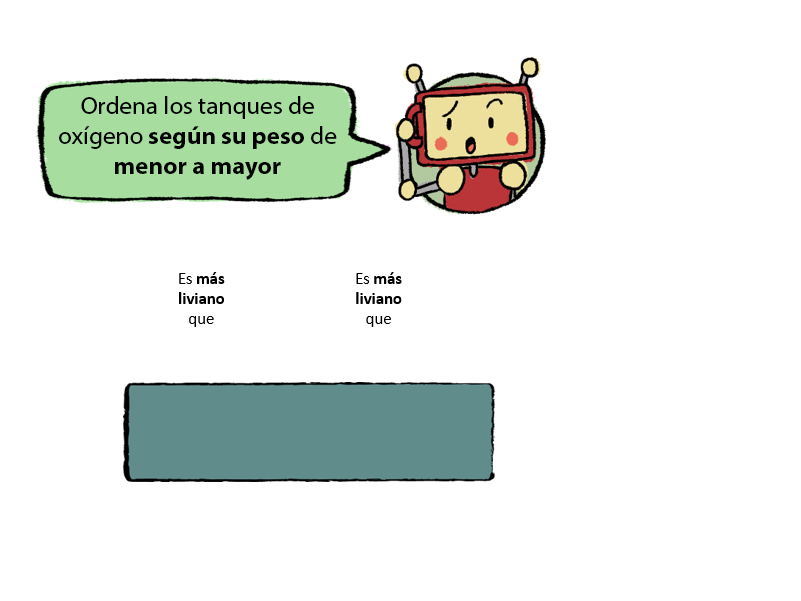
<style>
.page{position:relative;width:801px;height:601px;background:#ffffff}
.page>*{position:absolute;margin:0}
.t1{font:25px "MyriadHebrew-Regular";color:#000000}
.t2{font:25px "MyriadHebrew-Bold";color:#000000}
</style>
<div class="page">
<p class="t1" style="left:59px;top:96px;width:278px;height:84px;text-align:center">Ordena los tanques de <br>oxígeno<span class="t2"> según su peso </span>de<span class="t2"> menor a mayor</span></p>
</div>
